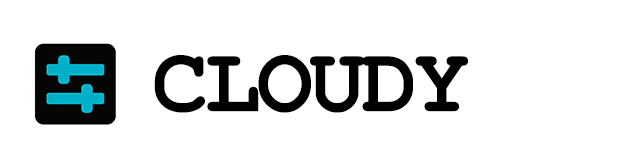
<style>
.page{position:relative;width:642px;height:168px;background:#ffffff}
.page>*{position:absolute;margin:0}
.t1{font:92.4px "CourierNewPS-BoldMT";letter-spacing:-0.04em;color:#000000;text-transform:uppercase}
</style>
<div class="page">
<p class="t1" style="left:154px;top:55px;width:315px;height:58px">cloudy</p>
</div>
